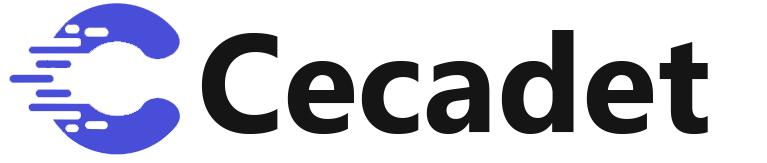
<style>
.page{position:relative;width:767px;height:163px;background:#ffffff}
.page>*{position:absolute;margin:0}
.t1{font:137.5px "MicrosoftNewTaiLue-Bold";color:#151515}
</style>
<div class="page">
<p class="t1" style="left:201px;top:30px;width:507px;height:104px">Cecadet</p>
</div>
